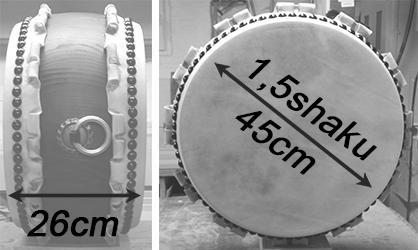
<style>
.page{position:relative;width:418px;height:250px}
.page>*{position:absolute;margin:0}
.t1{font:36px/47px "ArialMT";color:#000000;font-weight:bold;font-style:italic}
.t2{font:36px "ArialMT";color:#000000;font-weight:bold;font-style:italic}
</style>
<div class="page">
<p class="t1" style="left:235px;top:59px;width:142px;height:116px;rotate:36deg">1,5shaku<br>  45cm</p>
<p class="t2" style="left:27px;top:210px;width:92px;height:27px">26cm</p>
</div>
